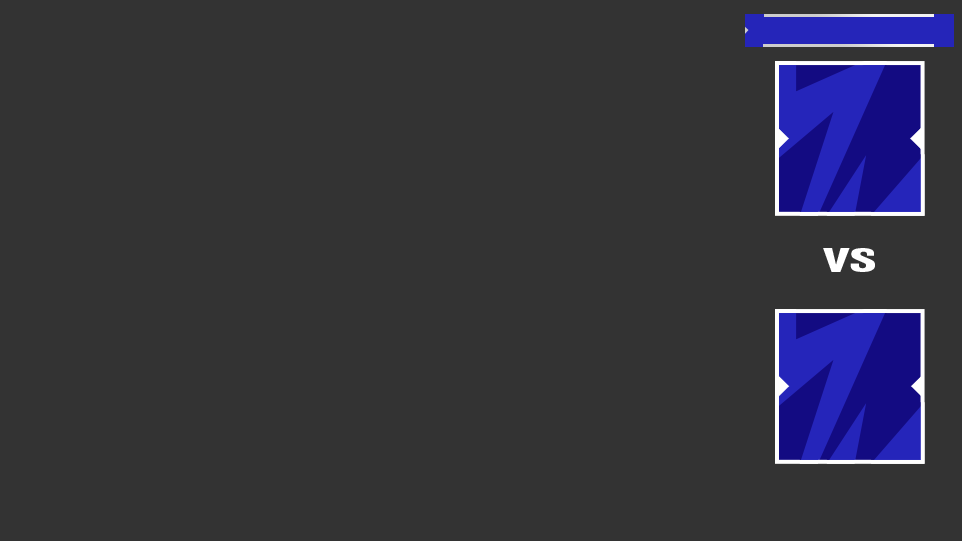
<style>
.page{position:relative;width:962px;height:541px;background:#333333}
.page>*{position:absolute;margin:0}
.t1{font:44.9px "AkzidenzGroteskBQ-BdCnd";color:#ffffff;scale:1.68 1}
</style>
<div class="page">
<p class="t1" style="left:823px;top:248px;width:52px;height:24px">vs</p>
</div>
